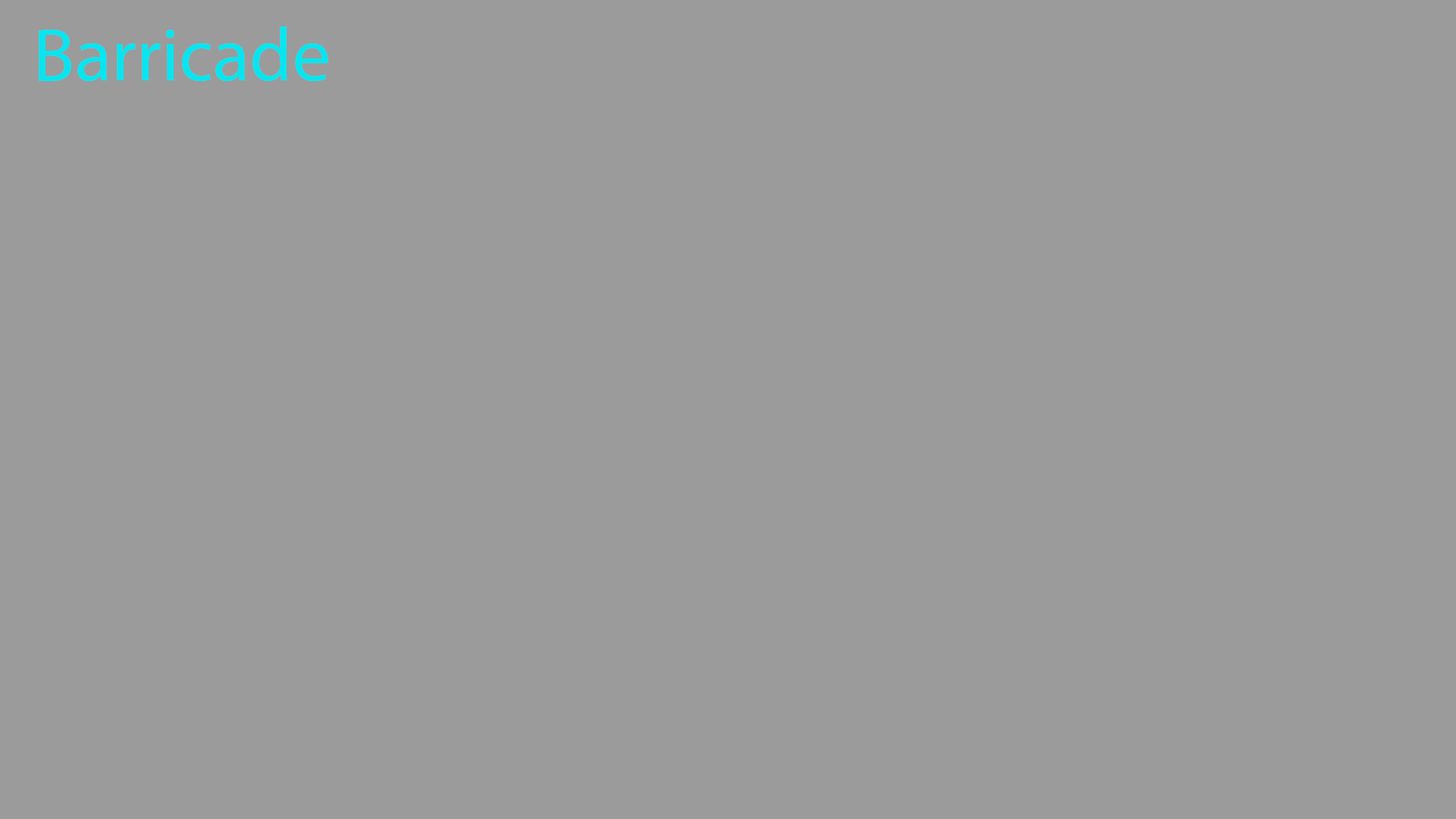
<style>
.page{position:relative;width:1456px;height:819px;background:#9b9b9b}
.page>*{position:absolute;margin:0}
.t1{font:75.8px "MyriadPro-Regular";color:#08e5f0}
</style>
<div class="page">
<p class="t1" style="left:39px;top:27px;width:289px;height:54px">Barricade</p>
</div>
